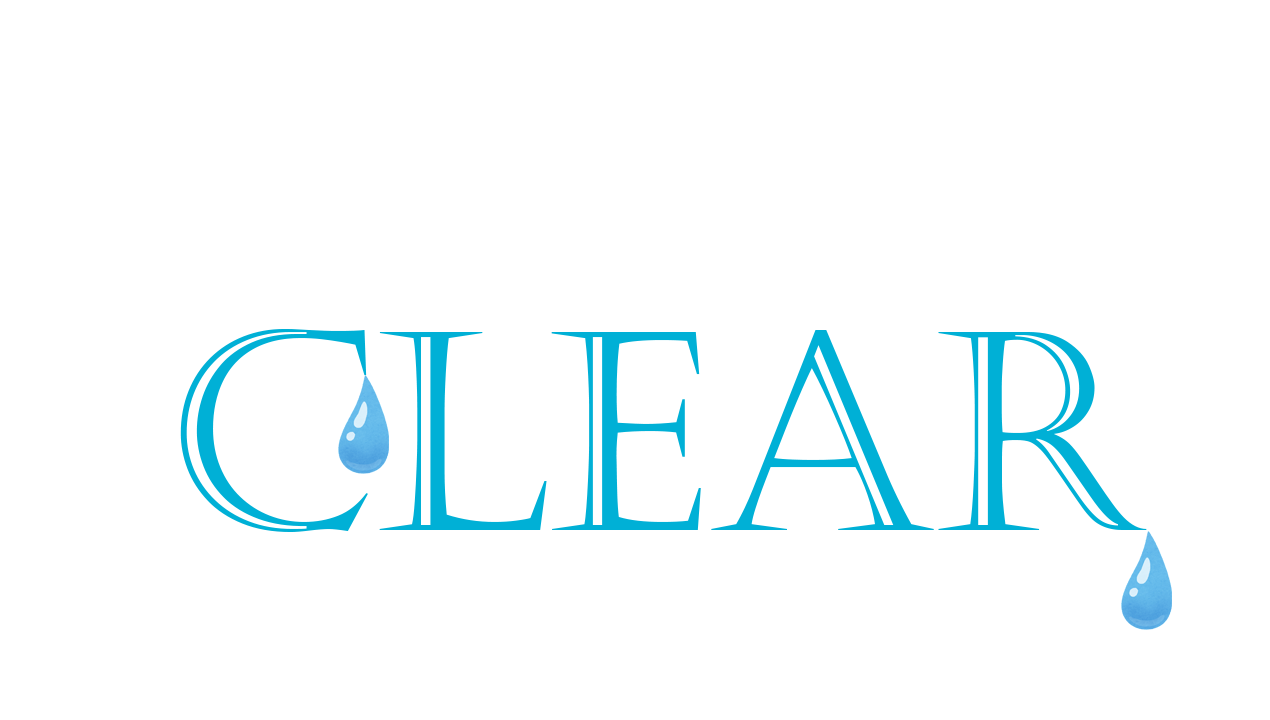
<style>
.page{position:relative;width:1270px;height:720px;background:#ffffff}
.page>*{position:absolute;margin:0}
.t1{font:277.1px "Castellar";color:#00b0d6}
</style>
<div class="page">
<p class="t1" style="left:180px;top:329px;width:967px;height:203px">CLEAR</p>
</div>
